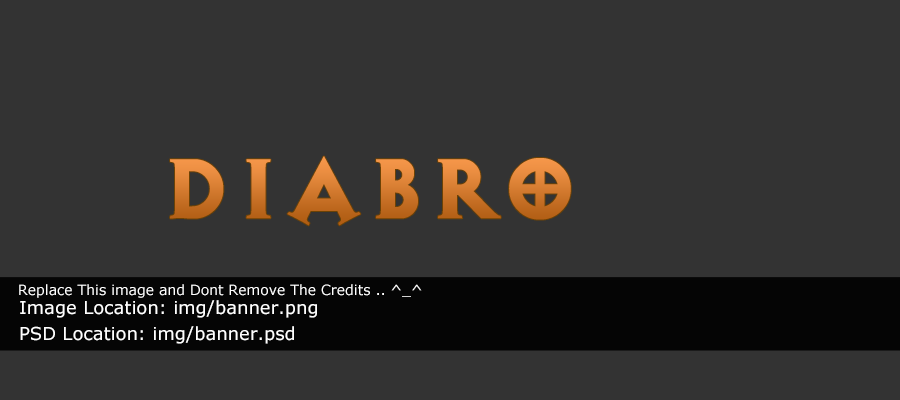
<style>
.page{position:relative;width:900px;height:400px;background:#333333}
.page>*{position:absolute;margin:0}
.t1{font:100px "ExocetHeavy"}
.t2{font:14px "Verdana";color:#ffffff}
.t3{font:18px/13px "Verdana";color:#ffffff}
</style>
<div class="page">
<p class="t1" style="left:170px;top:156px;width:401px;height:70px">DiabRO</p>
<p class="t2" style="left:19px;top:284px;width:403px;height:14px">Replace This image and Dont Remove The Credits .. ^_^</p>
<p class="t3" style="left:20px;top:300px;width:297px;height:44px">Image Location: img/banner.png<br><br>PSD Location: img/banner.psd</p>
</div>
